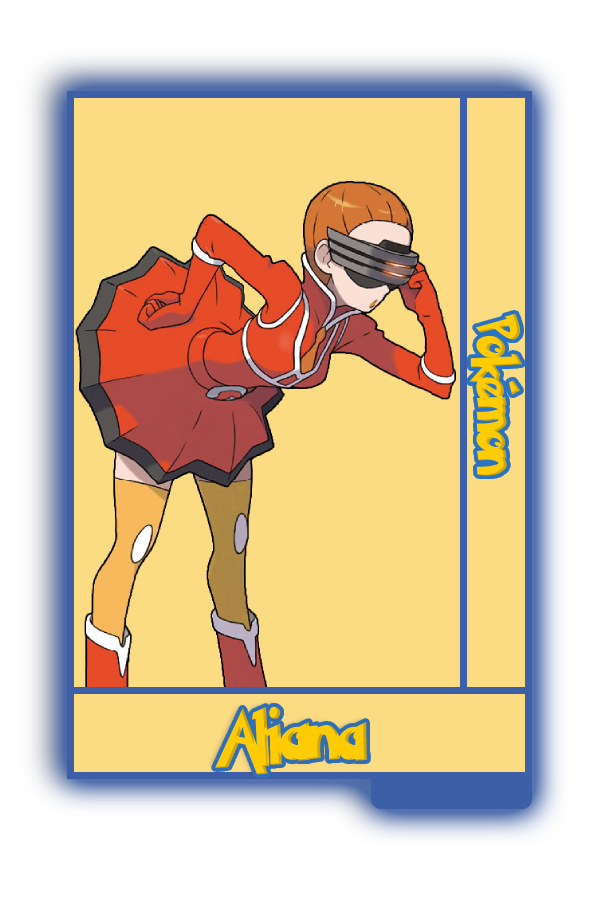
<style>
.page{position:relative;width:600px;height:900px;background:#fbdc83}
.page>*{position:absolute;margin:0}
.t1{font:48.8px "PokemonSolidNormal";color:#ffcb05;scale:0.8 1}
.t2{font:56.6px "PokemonSolidNormal";color:#ffcb05;scale:0.92 1}
</style>
<div class="page">
<p class="t1" style="left:469px;top:313px;width:54px;height:163px;rotate:90deg">Pokémon</p>
<p class="t2" style="left:215px;top:706px;width:152px;height:69px">Aliana</p>
</div>
